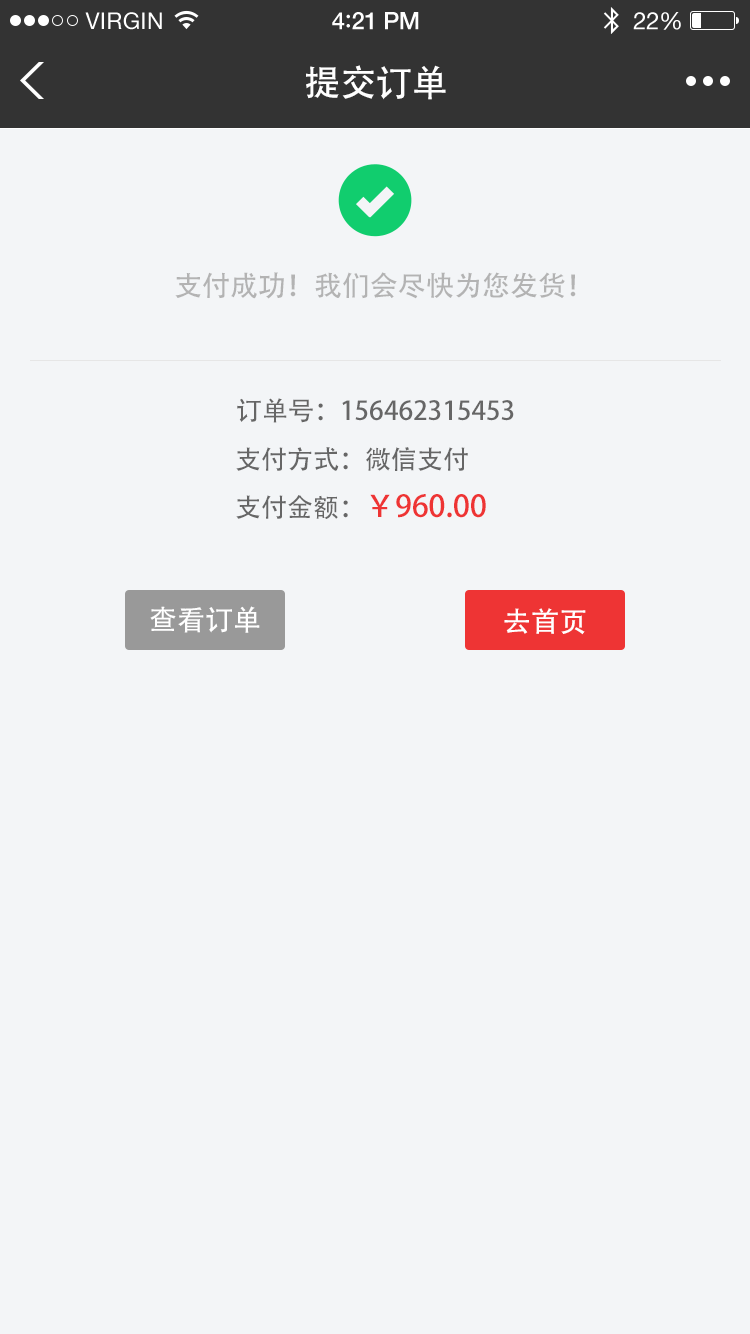
<style>
.page{position:relative;width:750px;height:1334px;background:#f3f5f7}
.page>*{position:absolute;margin:0}
.t1{font:36px "AdobeHeitiStd-Regular";color:#ffffff}
.t2{font:28px "AdobeHeitiStd-Regular";color:#b3b3b3}
.t3{font:26px "AdobeHeitiStd-Regular";color:#666666}
.t4{font:30px "AdobeHeitiStd-Regular";color:#ee3434}
.t5{font:28px "AdobeHeitiStd-Regular";color:#ffffff}
</style>
<div class="page">
<p class="t1" style="left:306px;top:65px;width:140px;height:35px">提交订单</p>
<p class="t2" style="left:175px;top:272px;width:401px;height:27px">支付成功！我们会尽快为您发货！</p>
<p class="t3" style="left:237px;top:398px;width:277px;height:25px">订单号：156462315453</p>
<p class="t3" style="left:236px;top:447px;width:232px;height:24px">支付方式：微信支付</p>
<p class="t4" style="left:236px;top:494px;width:250px;height:25px"><span class="t3">支付金额：</span>￥960.00</p>
<p class="t5" style="left:150px;top:606px;width:110px;height:27px">查看订单</p>
<p class="t5" style="left:504px;top:608px;width:82px;height:27px">去首页</p>
</div>
